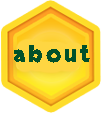
<style>
.page{position:relative;width:103px;height:114px;background:#ffffff}
.page>*{position:absolute;margin:0}
.t1{font:22px "Skranji-Bold";letter-spacing:0.15em;color:#01512b}
</style>
<div class="page">
<p class="t1" style="left:14px;top:45px;width:76px;height:18px">about</p>
</div>
